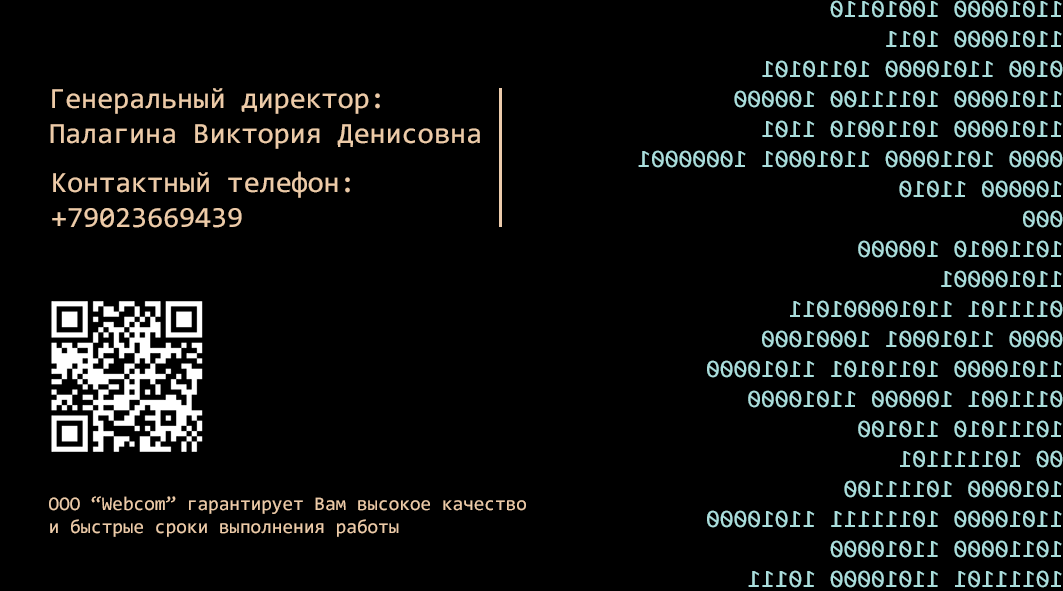
<style>
.page{position:relative;width:1063px;height:591px;background:#000000}
.page>*{position:absolute;margin:0}
.t1{font:29.2px "Consolas";color:#edcba8}
.t2{font:19.3px "Consolas";color:#edcba8}
</style>
<div class="page">
<p class="t1" style="left:50px;top:88px;width:430px;height:61px">Генеральный директор:<br>Палагина Виктория Денисовна</p>
<p class="t1" style="left:52px;top:171px;width:298px;height:57px">Контактный телефон:<br>+79023669439</p>
<p class="t2" style="left:49px;top:496px;width:477px;height:41px">ООО “Webcom” гарантирует Вам высокое качество<br>и быстрые сроки выполнения работы</p>
</div>
